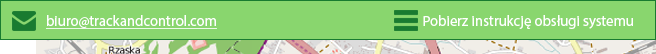
<style>
.page{position:relative;width:656px;height:54px;background:#89d66e}
.page>*{position:absolute;margin:0}
.t1{font:14.7px "MyriadPro-Regular";color:#ffffff}
.t2{font:14.7px "MyriadPro-Regular";color:#ffffff;text-decoration:underline}
</style>
<div class="page">
<p class="t1" style="left:46px;top:15px;width:587px;height:14px"><span class="t2">biuro@trackandcontrol.com</span>                                                                  Pobierz instrukcję obsługi systemu</p>
</div>
